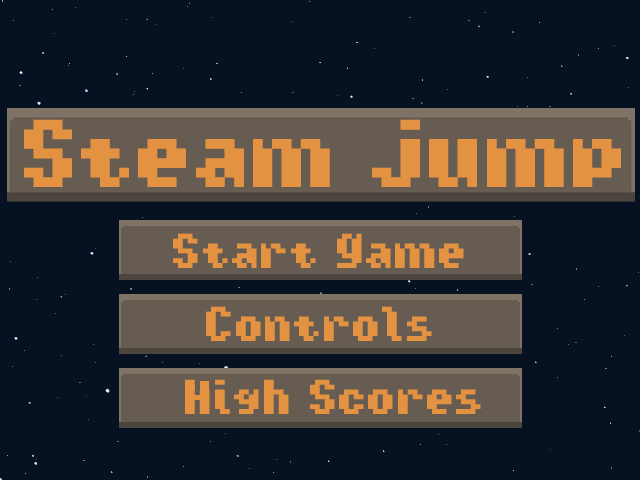
<style>
.page{position:relative;width:640px;height:480px;background:#061221}
.page>*{position:absolute;margin:0}
.t1{font:134.1px "Tiny-Islanders";color:#e39242}
.t2{font:68.5px "Tiny-Islanders";color:#e39242}
</style>
<div class="page">
<p class="t1" style="left:24px;top:119px;width:597px;height:68px">Steam Jump</p>
<p class="t2" style="left:173px;top:233px;width:291px;height:35px">Start Game</p>
<p class="t2" style="left:206px;top:306px;width:226px;height:35px">Controls</p>
</div>
